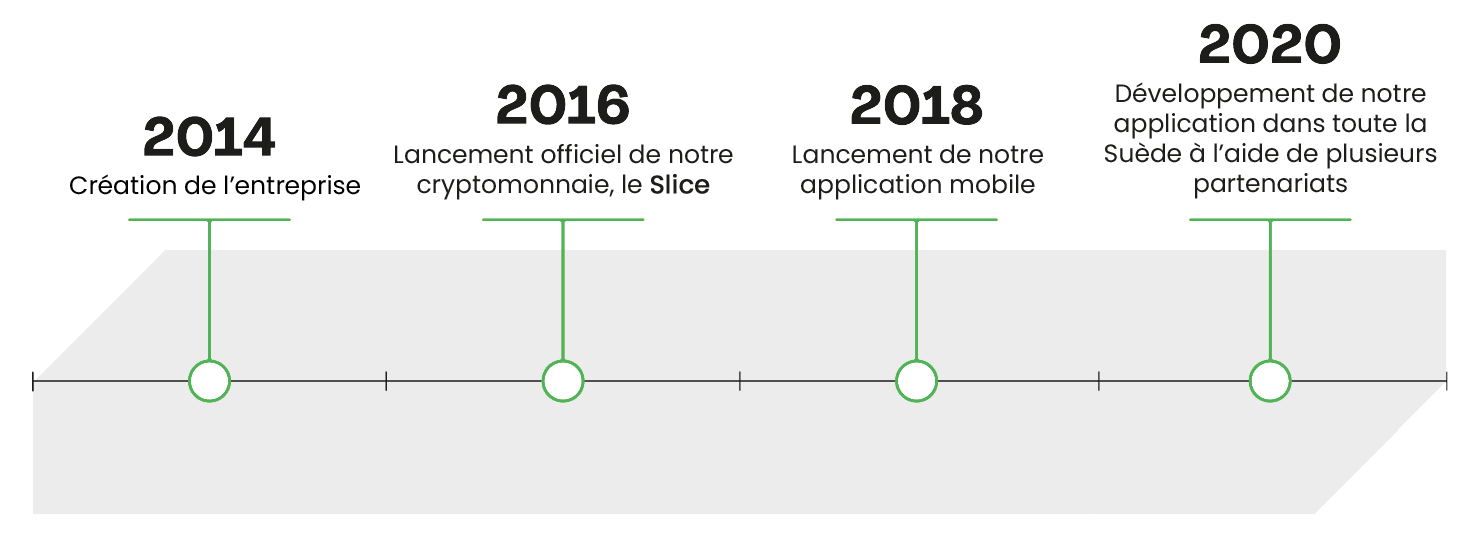
<style>
.page{position:relative;width:1483px;height:544px;background:#ffffff}
.page>*{position:absolute;margin:0}
.t1{font:25px "Poppins-Regular";color:#1d1d1b}
.t2{font:25px "Poppins-Regular";color:#1d1d1b;font-weight:bold}
.t3{font:25px "Poppins-Regular";color:#000000}
</style>
<div class="page">
<p class="t1" style="left:1105px;top:82px;width:332px;height:117px;text-align:center">Développement de notre application dans toute la Suède à l’aide de plusieurs partenariats</p>
<p class="t1" style="left:395px;top:144px;width:338px;height:56px;text-align:center">Lancement officiel de notre cryptomonnaie, le <span class="t2">Slice</span></p>
<p class="t1" style="left:793px;top:144px;width:250px;height:56px;text-align:center">Lancement de notre application mobile</p>
<p class="t3" style="left:70px;top:174px;width:290px;height:27px">Création de l’entreprise</p>
</div>
